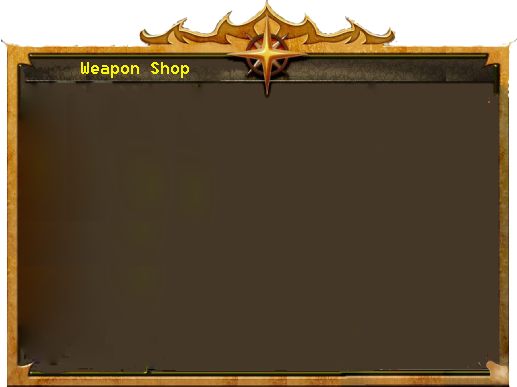
<style>
.page{position:relative;width:517px;height:387px;background:#443727}
.page>*{position:absolute;margin:0}
.t1{font:18px "Fixedsys";color:#f8f602}
</style>
<div class="page">
<p class="t1" style="left:81px;top:62px;width:108px;height:16px">Weapon Shop</p>
</div>
